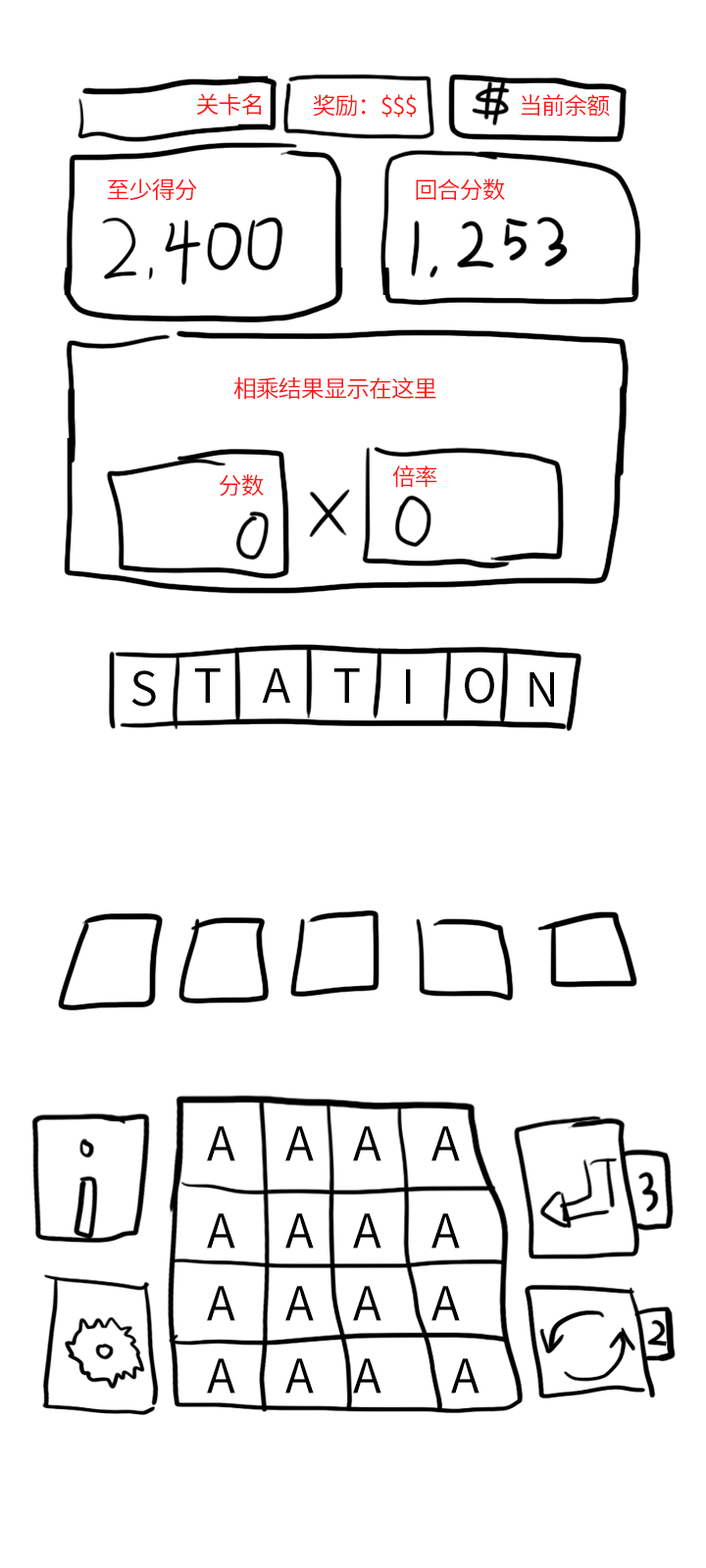
<style>
.page{position:relative;width:706px;height:1568px;background:#ffffff}
.page>*{position:absolute;margin:0}
.t1{font:23.5px "SourceHanSansCN-Regular";letter-spacing:-0.04em;color:#ff1616}
.t2{font:47px "SourceHanSansCN-Regular";letter-spacing:-0.04em;color:#000000}
</style>
<div class="page">
<p class="t1" style="left:196px;top:93px;width:65px;height:23px">关卡名</p>
<p class="t1" style="left:313px;top:94px;width:103px;height:24px">奖励：$$$</p>
<p class="t1" style="left:521px;top:94px;width:89px;height:23px">当前余额</p>
<p class="t1" style="left:107px;top:178px;width:90px;height:23px">至少得分</p>
<p class="t1" style="left:416px;top:178px;width:89px;height:23px">回合分数</p>
<p class="t1" style="left:233px;top:376px;width:203px;height:24px">相乘结果显示在这里</p>
<p class="t1" style="left:392px;top:466px;width:45px;height:21px">倍率</p>
<p class="t1" style="left:219px;top:474px;width:45px;height:23px">分数</p>
<p class="t2" style="left:131px;top:670px;width:25px;height:37px">S</p>
<p class="t2" style="left:194px;top:668px;width:26px;height:36px">T</p>
<p class="t2" style="left:262px;top:668px;width:29px;height:36px">A</p>
<p class="t2" style="left:333px;top:668px;width:27px;height:36px">T</p>
<p class="t2" style="left:406px;top:669px;width:5px;height:36px">I</p>
<p class="t2" style="left:465px;top:667px;width:29px;height:37px">O</p>
<p class="t2" style="left:529px;top:672px;width:25px;height:36px">N</p>
<p class="t2" style="left:207px;top:1126px;width:28px;height:35px">A</p>
<p class="t2" style="left:285px;top:1126px;width:29px;height:35px">A</p>
<p class="t2" style="left:353px;top:1126px;width:28px;height:35px">A</p>
<p class="t2" style="left:431px;top:1126px;width:29px;height:35px">A</p>
<p class="t2" style="left:207px;top:1213px;width:28px;height:36px">A</p>
<p class="t2" style="left:285px;top:1213px;width:29px;height:36px">A</p>
<p class="t2" style="left:353px;top:1213px;width:28px;height:36px">A</p>
<p class="t2" style="left:431px;top:1213px;width:29px;height:36px">A</p>
<p class="t2" style="left:207px;top:1286px;width:28px;height:35px">A</p>
<p class="t2" style="left:285px;top:1286px;width:29px;height:35px">A</p>
<p class="t2" style="left:353px;top:1286px;width:28px;height:35px">A</p>
<p class="t2" style="left:431px;top:1286px;width:29px;height:35px">A</p>
<p class="t2" style="left:207px;top:1358px;width:28px;height:36px">A</p>
<p class="t2" style="left:285px;top:1358px;width:29px;height:36px">A</p>
<p class="t2" style="left:353px;top:1358px;width:28px;height:36px">A</p>
<p class="t2" style="left:451px;top:1358px;width:28px;height:36px">A</p>
</div>
